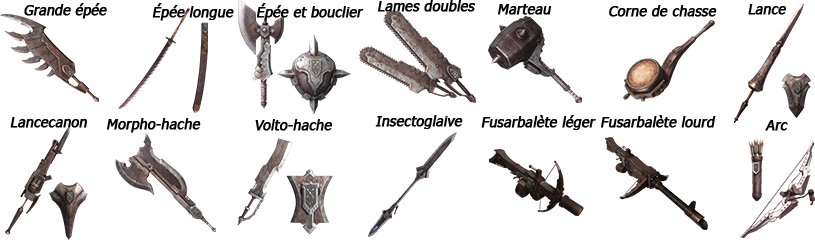
<style>
.page{position:relative;width:815px;height:240px;background:#ffffff}
.page>*{position:absolute;margin:0}
.t1{font:13.9px "Tahoma";color:#000000;font-weight:bold;font-style:italic}
.t2{font:14px "Tahoma";color:#000000;font-weight:bold;font-style:italic}
</style>
<div class="page">
<p class="t1" style="left:24px;top:3px;width:83px;height:16px">Grande épée</p>
<p class="t2" style="left:152px;top:3px;width:82px;height:18px">Épée longue</p>
<p class="t1" style="left:256px;top:3px;width:108px;height:18px">Épée et bouclier</p>
<p class="t2" style="left:378px;top:0px;width:97px;height:12px">Lames doubles</p>
<p class="t2" style="left:498px;top:4px;width:54px;height:11px">Marteau</p>
<p class="t2" style="left:609px;top:5px;width:108px;height:12px">Corne de chasse</p>
<p class="t2" style="left:748px;top:4px;width:38px;height:11px">Lance</p>
<p class="t2" style="left:10px;top:117px;width:77px;height:11px">Lancecanon</p>
<p class="t2" style="left:107px;top:118px;width:94px;height:15px">Morpho-hache</p>
<p class="t2" style="left:255px;top:119px;width:77px;height:12px">Volto-hache</p>
<p class="t2" style="left:375px;top:115px;width:88px;height:14px">Insectoglaive</p>
<p class="t2" style="left:481px;top:115px;width:115px;height:15px">Fusarbalète léger</p>
<p class="t2" style="left:601px;top:115px;width:115px;height:13px">Fusarbalète lourd</p>
<p class="t2" style="left:765px;top:120px;width:23px;height:11px">Arc</p>
</div>
